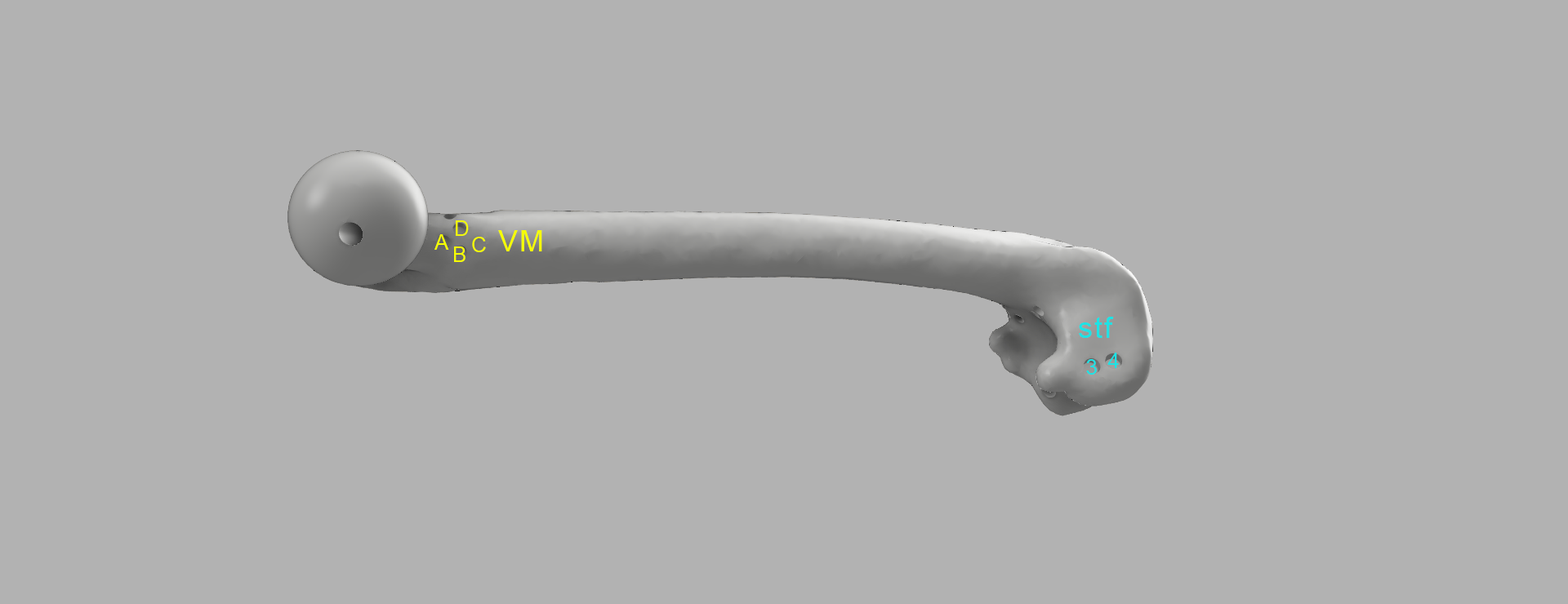
<style>
.page{position:relative;width:1568px;height:604px;background:#b2b2b2}
.page>*{position:absolute;margin:0}
.t1{font:21.2px "ArialMT";letter-spacing:0.06em;color:#eff70b}
.t2{font:29.4px "ArialMT";letter-spacing:0.06em;color:#f6ff00}
.t3{font:21.2px "ArialMT";letter-spacing:0.06em;color:#f6ff00}
.t4{font:29.4px "ArialMT";letter-spacing:0.06em;color:#1ce3e5}
.t5{font:21.2px "ArialMT";letter-spacing:0.06em;color:#1ce3e5}
</style>
<div class="page">
<p class="t1" style="left:456px;top:220px;width:13px;height:16px">D</p>
<p class="t2" style="left:498px;top:230px;width:44px;height:22px">VM</p>
<p class="t3" style="left:434px;top:234px;width:15px;height:16px">A</p>
<p class="t3" style="left:472px;top:237px;width:14px;height:15px">C</p>
<p class="t3" style="left:454px;top:247px;width:12px;height:15px">B</p>
<p class="t4" style="left:1079px;top:317px;width:35px;height:21px">stf</p>
<p class="t5" style="left:1107px;top:353px;width:12px;height:15px">4</p>
<p class="t5" style="left:1086px;top:359px;width:11px;height:16px">3</p>
</div>
